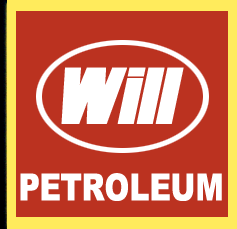
<style>
.page{position:relative;width:237px;height:229px;background:#bb3220}
.page>*{position:absolute;margin:0}
.t1{font:79.2px "Haettenschweiler";color:#ffffff;font-weight:bold;font-style:italic;scale:1.2 1}
.t2{font:37.5px "Arial-Black";color:#ffffff;scale:0.79 1}
</style>
<div class="page">
<p class="t1" style="left:61px;top:67px;width:123px;height:57px">Will</p>
<p class="t2" style="left:20px;top:173px;width:202px;height:28px">PETROLEUM</p>
</div>
